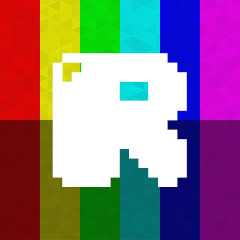
<style>
.page{position:relative;width:240px;height:240px;background:#ffffff}
.page>*{position:absolute;margin:0}
.t1{font:162.5px "04b30";color:#ffffff}
</style>
<div class="page">
<p class="t1" style="left:52px;top:53px;width:135px;height:134px">R</p>
</div>
